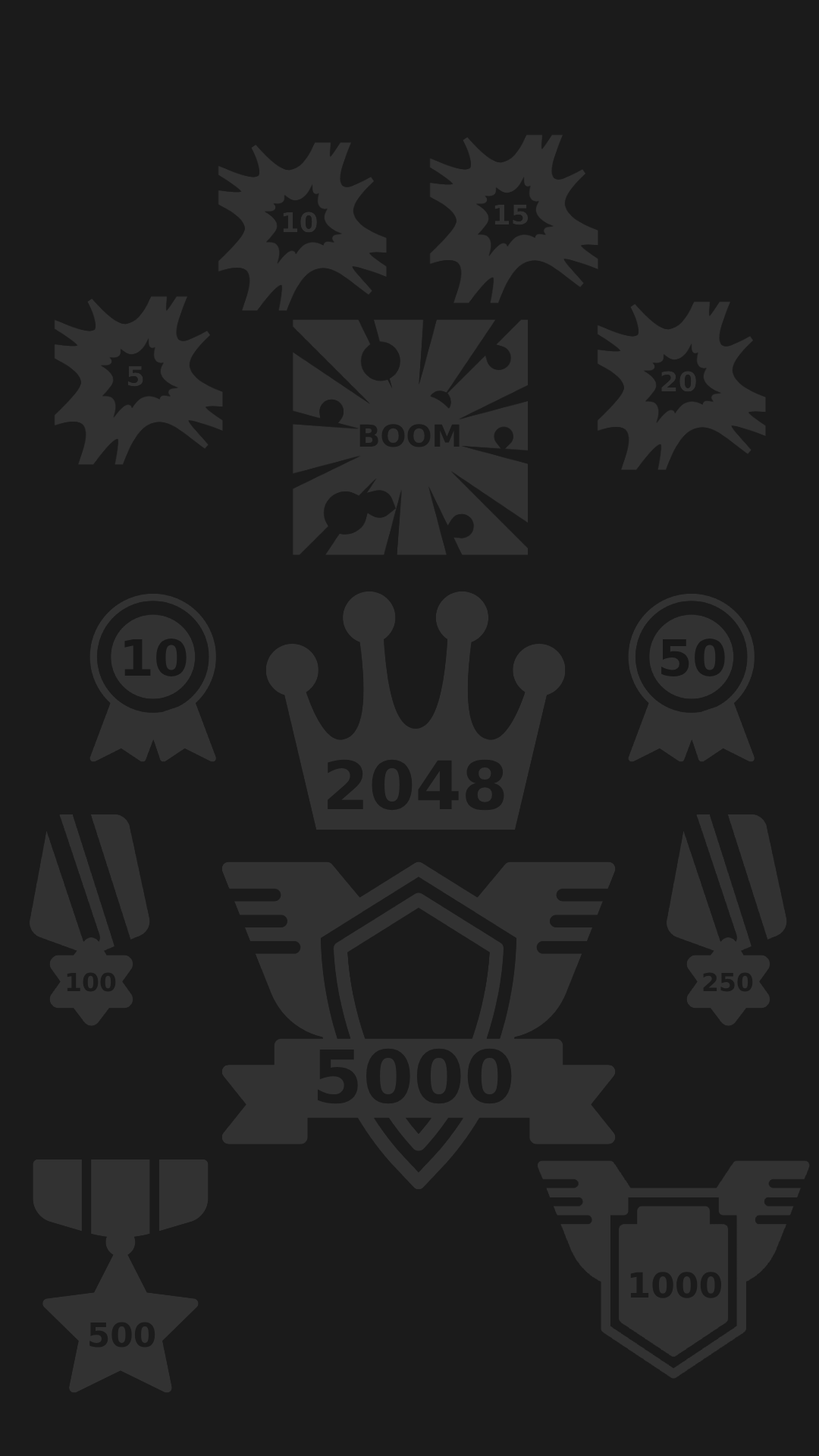
<style>
.page{position:relative;width:819px;height:1456px;background:#1b1b1b}
.page>*{position:absolute;margin:0}
.t1{font:27.3px "DejaVuSans-Bold";color:#323232}
.t2{font:30.3px "DejaVuSans-Bold";color:#1b1b1b}
.t3{font:50px "DejaVuSans-Bold";color:#000000}
.t4{font:66.7px "DejaVuSans-Bold";color:#1b1b1b}
.t5{font:25px "DejaVuSans-Bold";color:#1b1b1b}
.t6{font:72.9px "DejaVuSans-Bold";color:#1b1b1b}
.t7{font:34.5px "DejaVuSans-Bold";color:#1b1b1b}
.t8{font:33.2px "DejaVuSans-Bold";color:#1b1b1b}
</style>
<div class="page">
<p class="t1" style="left:494px;top:204px;width:35px;height:21px">15</p>
<p class="t1" style="left:283px;top:212px;width:34px;height:21px">10</p>
<p class="t1" style="left:127px;top:366px;width:16px;height:21px">5</p>
<p class="t1" style="left:661px;top:371px;width:35px;height:21px">20</p>
<p class="t2" style="left:359px;top:424px;width:101px;height:23px">BOOM</p>
<p class="t3" style="left:124px;top:639px;width:63px;height:37px">10</p>
<p class="t3" style="left:661px;top:639px;width:64px;height:37px">50</p>
<p class="t4" style="left:328px;top:759px;width:176px;height:52px">2048</p>
<p class="t5" style="left:67px;top:972px;width:49px;height:20px">100</p>
<p class="t5" style="left:703px;top:972px;width:50px;height:20px">250</p>
<p class="t6" style="left:317px;top:1048px;width:195px;height:56px">5000</p>
<p class="t7" style="left:630px;top:1272px;width:91px;height:26px">1000</p>
<p class="t8" style="left:89px;top:1322px;width:66px;height:26px">500</p>
</div>
